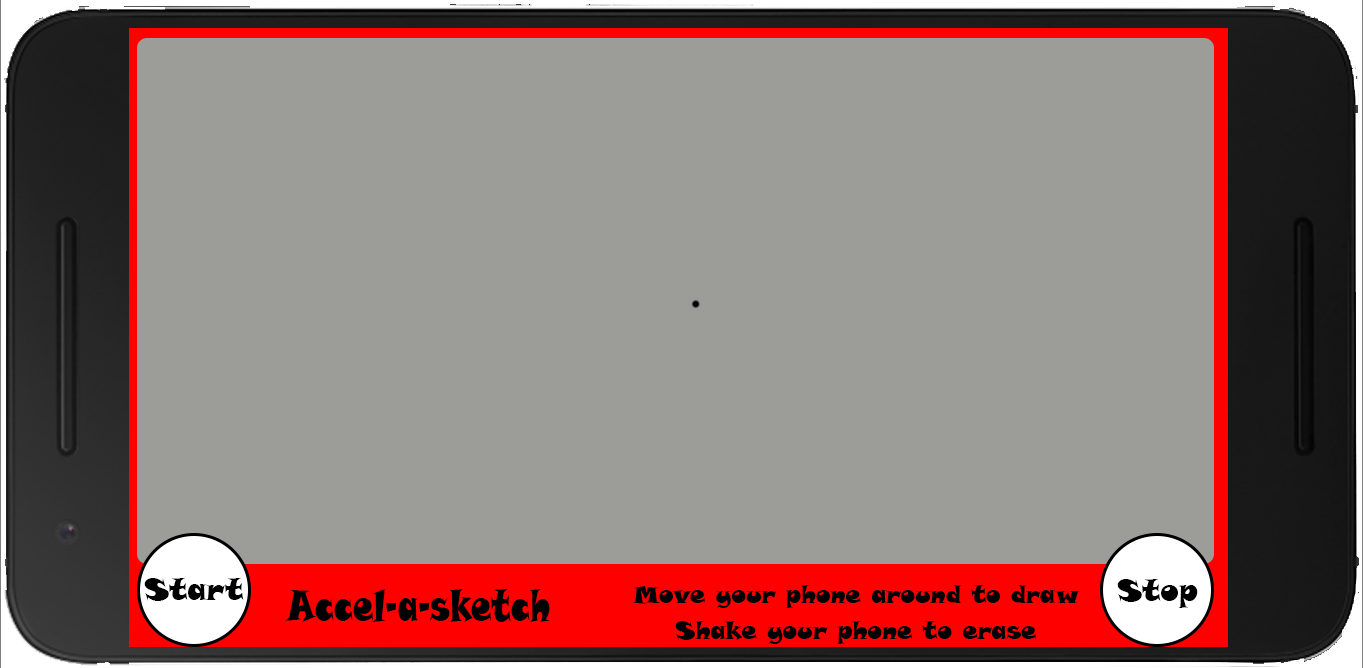
<style>
.page{position:relative;width:1363px;height:668px;background:#9c9d98}
.page>*{position:absolute;margin:0}
.t1{font:30px "SnapITC-Regular";color:#000000}
.t2{font:43.3px "SnapITC-Regular";color:#000000;scale:0.74 1}
.t3{font:24px "SnapITC-Regular";color:#000000}
</style>
<div class="page">
<p class="t1" style="left:144px;top:578px;width:100px;height:23px">Start</p>
<p class="t1" style="left:1117px;top:579px;width:81px;height:29px">Stop</p>
<p class="t2" style="left:285px;top:589px;width:265px;height:33px">Accel-a-sketch</p>
<p class="t3" style="left:633px;top:585px;width:447px;height:23px">Move your phone around to draw</p>
<p class="t3" style="left:675px;top:621px;width:361px;height:23px">Shake your phone to erase</p>
</div>
